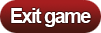
<style>
.page{position:relative;width:101px;height:33px}
.page>*{position:absolute;margin:0}
.t1{font:20px "Arial-BoldMT";letter-spacing:-0.08em;color:#ffffff}
</style>
<div class="page">
<p class="t1" style="left:11px;top:8px;width:80px;height:19px">Exit game</p>
</div>
